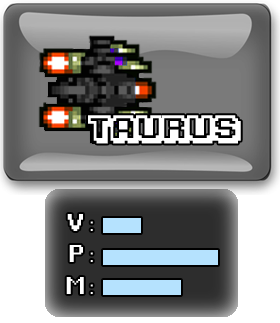
<style>
.page{position:relative;width:280px;height:323px}
.page>*{position:absolute;margin:0}
.t1{font:29px "KarmaticArcade";color:#ffffff}
.t2{font:60px "Game-Over";color:#ffffff}
.t3{font:60px "Game-Over";color:#fefefe}
</style>
<div class="page">
<p class="t1" style="left:88px;top:115px;width:153px;height:29px">Taurus</p>
<p class="t2" style="left:67px;top:214px;width:26px;height:17px">V :</p>
<p class="t3" style="left:69px;top:245px;width:24px;height:17px">P :</p>
<p class="t3" style="left:66px;top:277px;width:27px;height:17px">M :</p>
</div>
